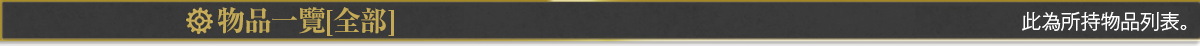
<style>
.page{position:relative;width:1200px;height:46px}
.page>*{position:absolute;margin:0}
.t1{font:28px "RyuminPr6N-ExBold";color:#c4a956}
.t2{font:20px "GothicMB101Pr6N-Light";color:#ffffff}
</style>
<div class="page">
<p class="t1" style="left:217px;top:7px;width:177px;height:29px">物品一覽[全部]</p>
<p class="t2" style="left:1022px;top:11px;width:165px;height:21px">此為所持物品列表。</p>
</div>
